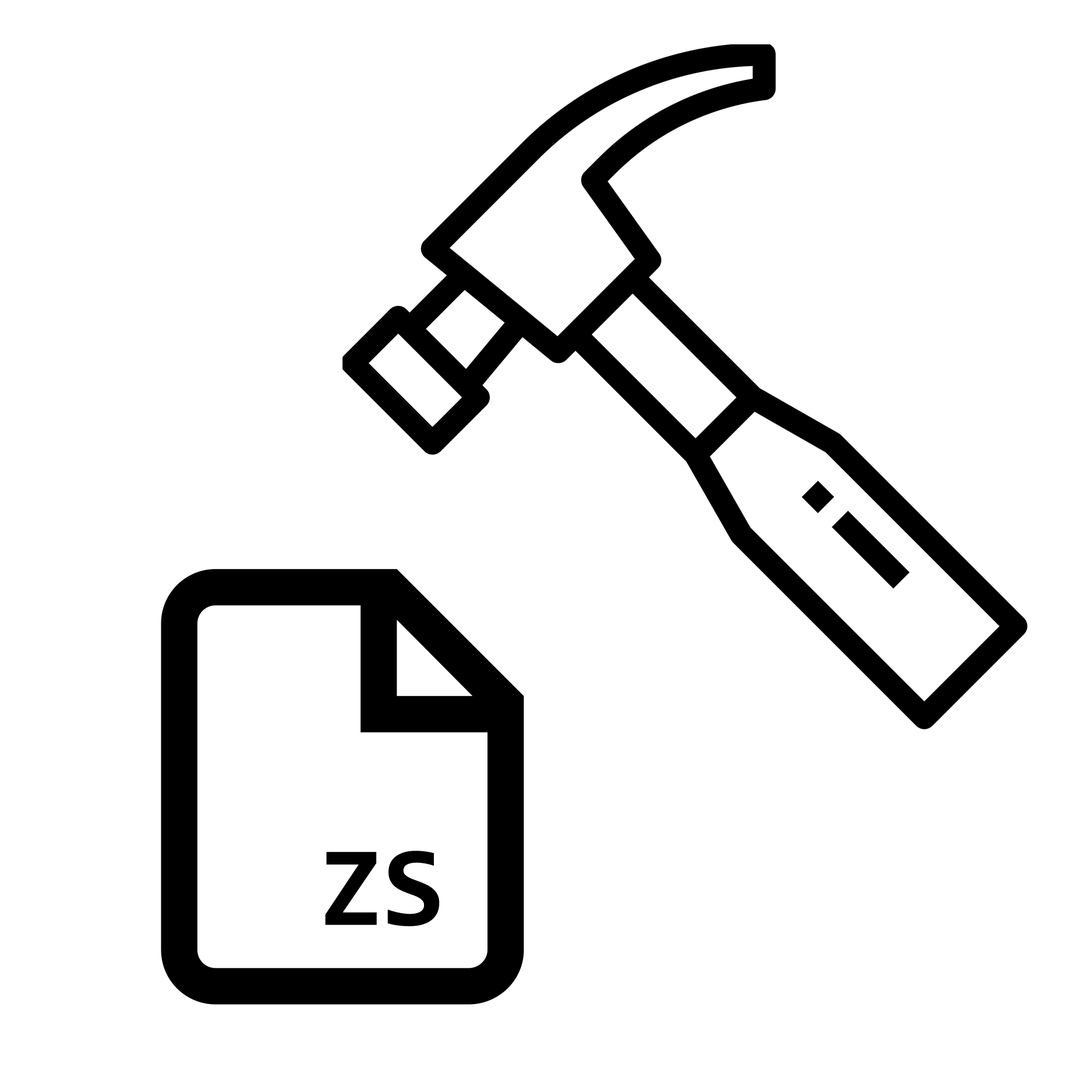
<style>
.page{position:relative;width:1092px;height:1092px;background:#ffffff}
.page>*{position:absolute;margin:0}
.t1{font:114px "Consolas-Bold";color:#000000}
</style>
<div class="page">
<p class="t1" style="left:325px;top:851px;width:114px;height:75px">ZS</p>
</div>
